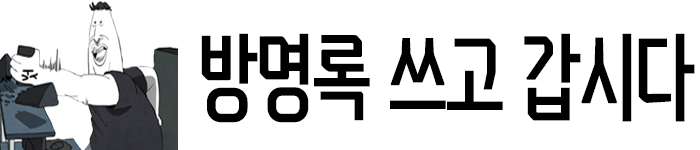
<style>
.page{position:relative;width:700px;height:150px;background:#ffffff}
.page>*{position:absolute;margin:0}
.t1{font:100px "Koverwatch";color:#000000;scale:0.88 1}
</style>
<div class="page">
<p class="t1" style="left:201px;top:33px;width:494px;height:90px">방명록 쓰고 갑시다</p>
</div>
